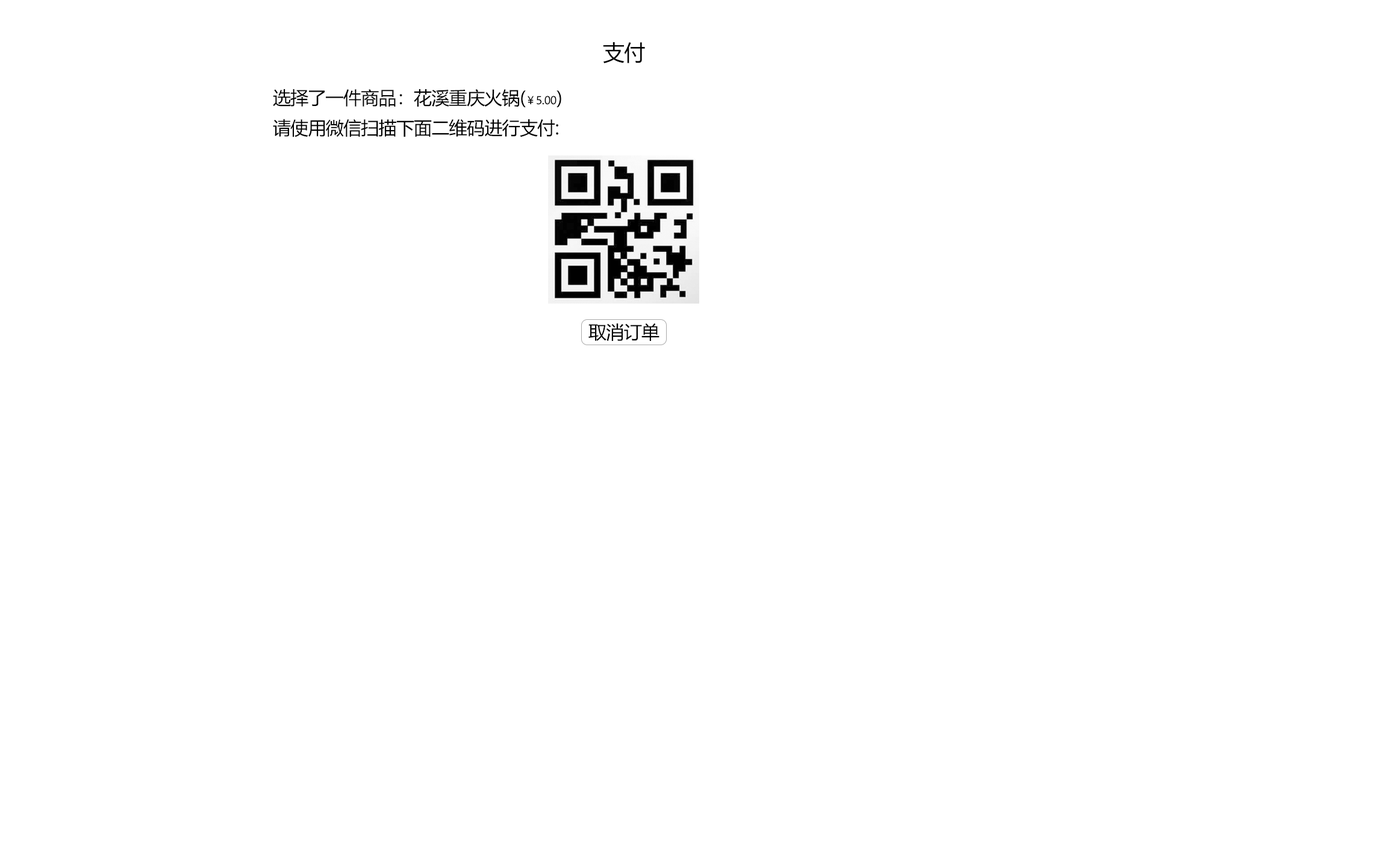
<style>
.page{position:relative;width:1378px;height:865px;background:#ffffff}
.page>*{position:absolute;margin:0}
.t1{font:21.7px "MicrosoftYaHei";letter-spacing:-0.024em;color:#000000}
.t2{font:18.1px "MicrosoftYaHei";letter-spacing:-0.024em;color:#000000}
.t3{font:10.8px "MicrosoftYaHei";letter-spacing:-0.024em;color:#000000}
</style>
<div class="page">
<p class="t1" style="left:603px;top:42px;width:42px;height:21px">支付</p>
<p class="t2" style="left:273px;top:89px;width:288px;height:18px">选择了一件商品：花溪重庆火锅(<span class="t3">￥5.00</span>)</p>
<p class="t2" style="left:273px;top:119px;width:285px;height:18px">请使用微信扫描下面二维码进行支付:</p>
<p class="t2" style="left:589px;top:323px;width:71px;height:18px">取消订单</p>
</div>
